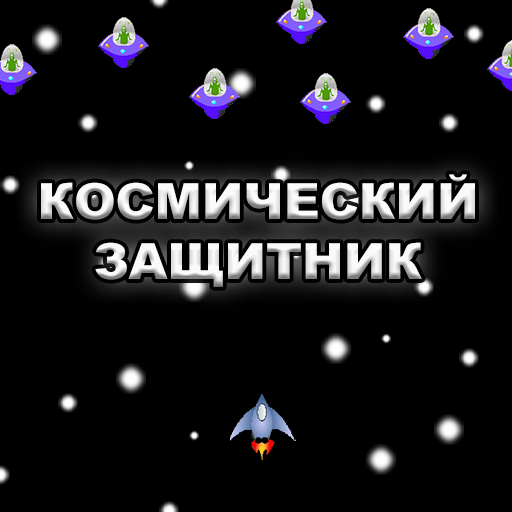
<style>
.page{position:relative;width:512px;height:512px;background:#000000}
.page>*{position:absolute;margin:0}
.t1{font:50px "Arial-Black";text-transform:uppercase}
</style>
<div class="page">
<p class="t1" style="left:41px;top:174px;width:434px;height:113px;text-align:center">КОСМИЧЕСКИЙ<br>ЗАЩИТНИК</p>
</div>
